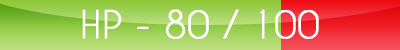
<style>
.page{position:relative;width:400px;height:50px}
.page>*{position:absolute;margin:0}
.t1{font:36px "CaviarDreams";color:#ffffff;text-transform:uppercase;font-weight:bold}
</style>
<div class="page">
<p class="t1" style="left:82px;top:9px;width:237px;height:30px">HP - 80 / 100</p>
</div>
